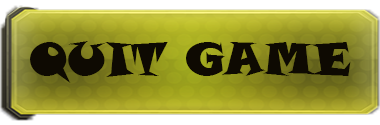
<style>
.page{position:relative;width:380px;height:125px}
.page>*{position:absolute;margin:0}
.t1{font:45.8px "SnapITC-Regular";color:#0e0a02}
</style>
<div class="page">
<p class="t1" style="left:30px;top:41px;width:321px;height:42px">QUIT GAME</p>
</div>
